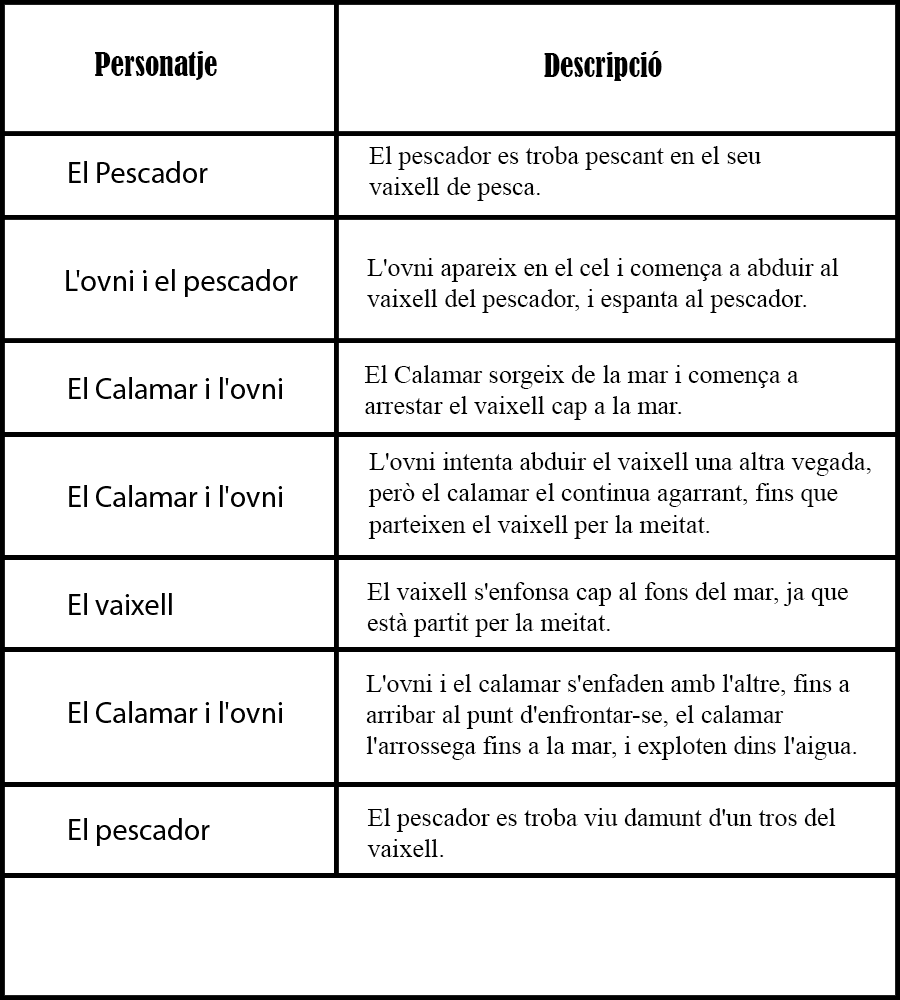
<style>
.page{position:relative;width:900px;height:1000px;background:#ffffff}
.page>*{position:absolute;margin:0}
.t1{font:30px "BernardMT-Condensed";color:#000000}
.t2{font:26px "TimesNewRomanPSMT";color:#000000}
</style>
<div class="page">
<p class="t1" style="left:95px;top:51px;width:122px;height:29px">Personatje</p>
<p class="t1" style="left:544px;top:51px;width:118px;height:30px">Descripció</p>
<p class="t2" style="left:369px;top:146px;width:392px;height:55px">El pescador es troba pescant en el seu<br>vaixell de pesca.</p>
<p class="t2" style="left:367px;top:258px;width:472px;height:55px">L'ovni apareix en el cel i comença a abduir al <br>vaixell del pescador, i espanta al pescador.</p>
<p class="t2" style="left:364px;top:365px;width:435px;height:55px">El Calamar sorgeix de la mar i comença a<br>arrestar el vaixell cap a la mar.</p>
<p class="t2" style="left:368px;top:452px;width:503px;height:87px">L'ovni intenta abduir el vaixell una altra vegada,<br>però el calamar el continua agarrant, fins que <br>parteixen el vaixell per la meitat.</p>
<p class="t2" style="left:367px;top:582px;width:481px;height:55px">El vaixell s'enfonsa cap al fons del mar, ja que<br>està partit per la meitat.</p>
<p class="t2" style="left:366px;top:674px;width:491px;height:86px">L'ovni i el calamar s'enfaden amb l'altre, fins a<br>arribar al punt d'enfrontar-se, el calamar <br>l'arrossega fins a la mar, i exploten dins l'aigua.</p>
<p class="t2" style="left:367px;top:808px;width:469px;height:49px">El pescador es troba viu damunt d'un tros del <br>vaixell.</p>
</div>
